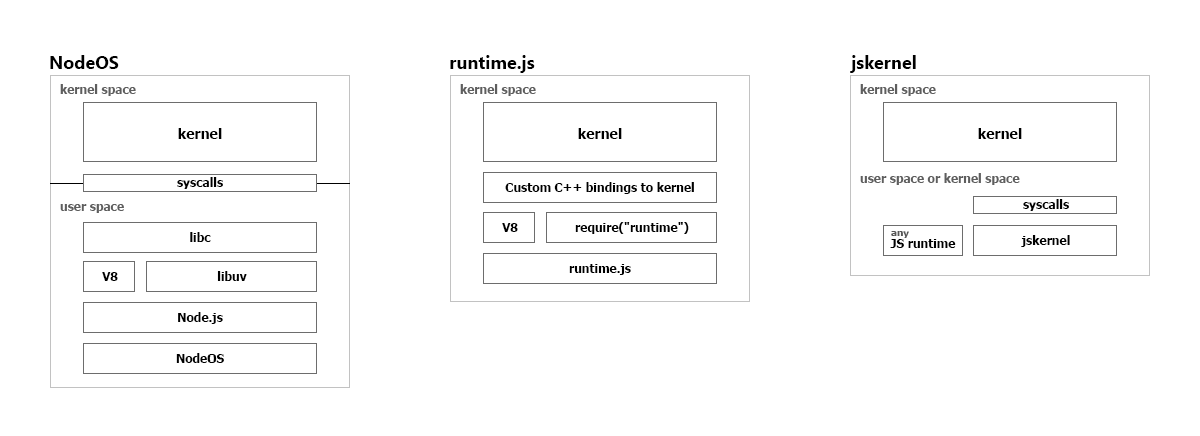
<style>
.page{position:relative;width:1200px;height:436px;background:#ffffff}
.page>*{position:absolute;margin:0}
.t1{font:18px "SegoeUI-Bold";color:#000000}
.t2{font:12px "Tahoma-Bold";color:#5e5e5e}
.t3{font:14px "Tahoma-Bold";color:#000000}
.t4{font:12px "Tahoma-Bold";color:#000000}
.t5{font:10px "Tahoma-Bold";color:#585858}
</style>
<div class="page">
<p class="t1" style="left:50px;top:55px;width:69px;height:14px">NodeOS</p>
<p class="t1" style="left:450px;top:55px;width:85px;height:18px">runtime.js</p>
<p class="t1" style="left:850px;top:55px;width:66px;height:18px">jskernel</p>
<p class="t2" style="left:60px;top:84px;width:76px;height:12px">kernel space</p>
<p class="t2" style="left:460px;top:84px;width:76px;height:12px">kernel space</p>
<p class="t2" style="left:860px;top:84px;width:76px;height:12px">kernel space</p>
<p class="t3" style="left:178px;top:128px;width:44px;height:11px">kernel</p>
<p class="t3" style="left:578px;top:128px;width:44px;height:11px">kernel</p>
<p class="t3" style="left:978px;top:128px;width:44px;height:11px">kernel</p>
<p class="t2" style="left:860px;top:173px;width:160px;height:12px">user space or kernel space</p>
<p class="t4" style="left:177px;top:177px;width:46px;height:12px">syscalls</p>
<p class="t4" style="left:505px;top:182px;width:189px;height:12px">Custom C++ bindings to kernel</p>
<p class="t2" style="left:60px;top:204px;width:64px;height:9px">user space</p>
<p class="t4" style="left:1023px;top:199px;width:46px;height:12px">syscalls</p>
<p class="t4" style="left:575px;top:222px;width:114px;height:12px">require("runtime")</p>
<p class="t4" style="left:190px;top:232px;width:21px;height:10px">libc</p>
<p class="t4" style="left:502px;top:223px;width:16px;height:9px">V8</p>
<p class="t5" style="left:891px;top:231px;width:18px;height:7px">any</p>
<p class="t4" style="left:890px;top:239px;width:66px;height:9px">JS runtime</p>
<p class="t4" style="left:1021px;top:235px;width:49px;height:12px">jskernel</p>
<p class="t4" style="left:569px;top:264px;width:62px;height:11px">runtime.js</p>
<p class="t4" style="left:102px;top:272px;width:16px;height:9px">V8</p>
<p class="t4" style="left:217px;top:271px;width:30px;height:10px">libuv</p>
<p class="t4" style="left:178px;top:312px;width:45px;height:12px">Node.js</p>
<p class="t4" style="left:176px;top:353px;width:48px;height:10px">NodeOS</p>
</div>
